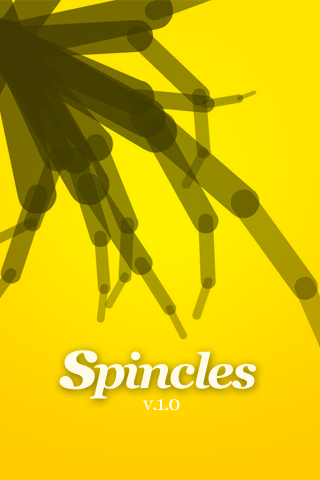
<style>
.page{position:relative;width:320px;height:480px}
.page>*{position:absolute;margin:0}
.t1{font:48.2px "Georgia-BoldItalic";letter-spacing:-0.05em;color:#fffbe6}
.t2{font:76.7px "Georgia-BoldItalic";letter-spacing:-0.07em;color:#fffbe6}
.t3{font:20px "Georgia";letter-spacing:-0.05em;color:#ffffff}
</style>
<div class="page">
<p class="t1" style="left:59px;top:350px;width:197px;height:49px"><span class="t2">s</span>pincles</p>
<p class="t3" style="left:142px;top:399px;width:38px;height:12px">v.1.0</p>
</div>
